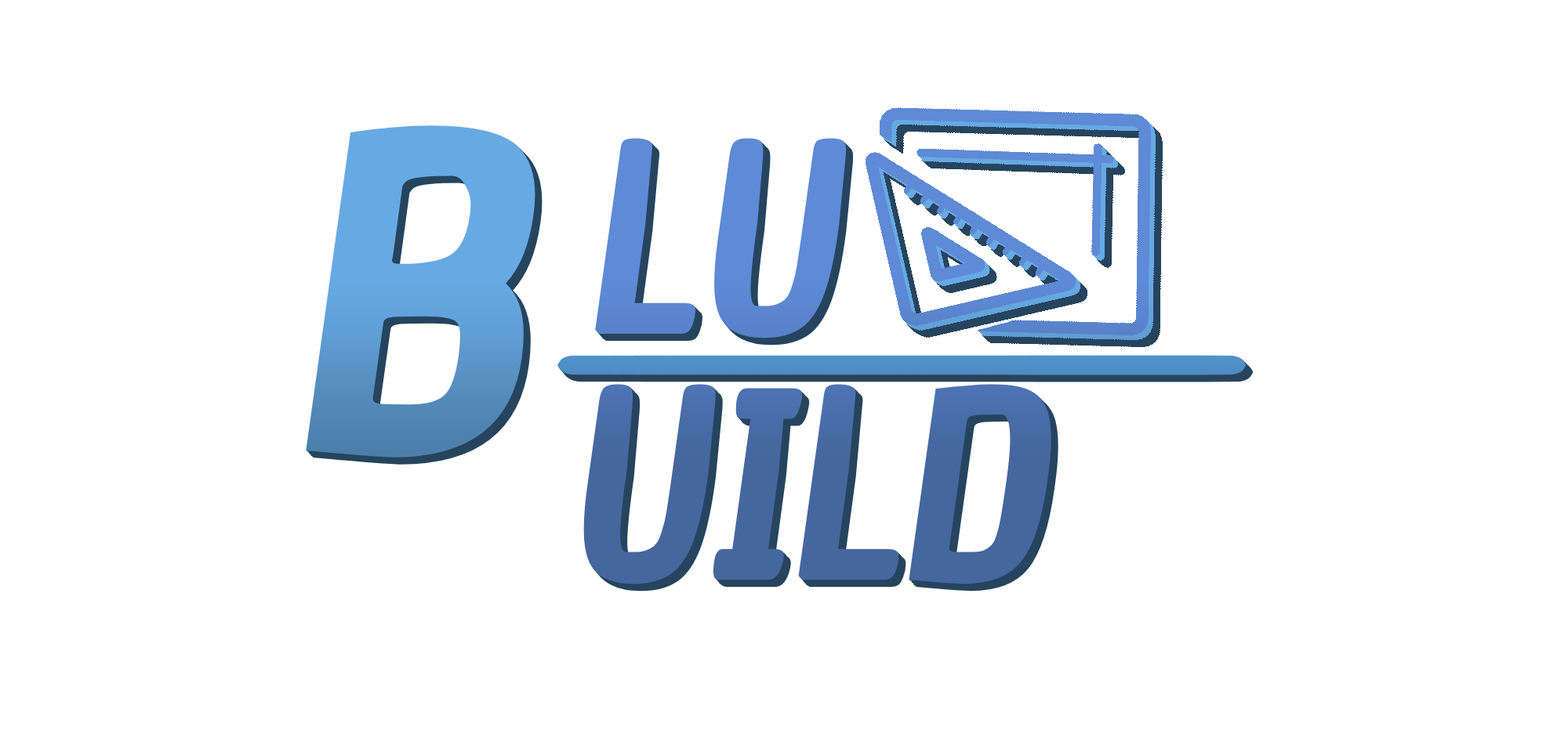
<style>
.page{position:relative;width:1568px;height:731px;background:#ffffff}
.page>*{position:absolute;margin:0}
.t1{font:423.4px "ChauPhilomeneOne-Italic";color:#67a9e3}
.t2{font:254.8px "ChauPhilomeneOne-Italic";color:#5e8ad6}
.t3{font:254.8px "ChauPhilomeneOne-Italic";color:#46669e}
</style>
<div class="page">
<p class="t1" style="left:306px;top:125px;width:229px;height:333px">B</p>
<p class="t2" style="left:595px;top:138px;width:252px;height:201px">LU</p>
<p class="t3" style="left:583px;top:384px;width:468px;height:201px">UILD</p>
</div>
